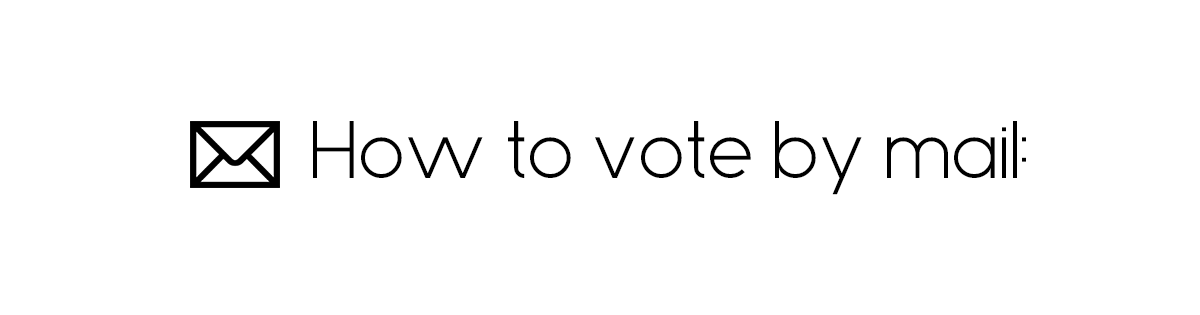
<style>
.page{position:relative;width:1200px;height:315px;background:#ffffff}
.page>*{position:absolute;margin:0}
.t1{font:83.3px "Sanseriffic";color:#000000}
</style>
<div class="page">
<p class="t1" style="left:313px;top:121px;width:713px;height:74px">How to vote by mail:</p>
</div>
